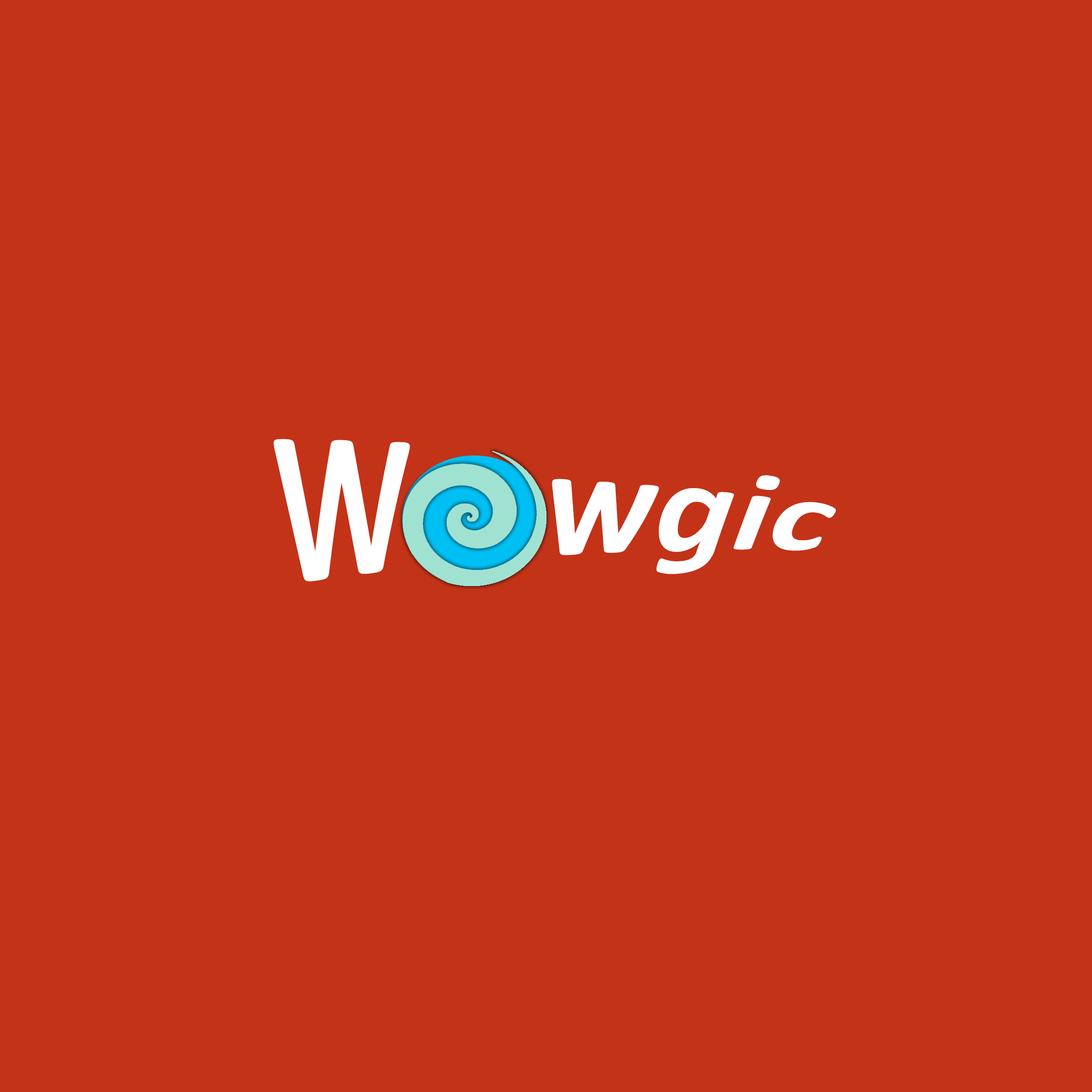
<style>
.page{position:relative;width:1092px;height:1092px;background:#c33318}
.page>*{position:absolute;margin:0}
.t1{font:161.8px "Calibri-BoldItalic";color:#ffffff;scale:0.9 1}
</style>
<div class="page">
<p class="t1" style="left:273px;top:439px;width:563px;height:143px">W    wgic</p>
</div>
